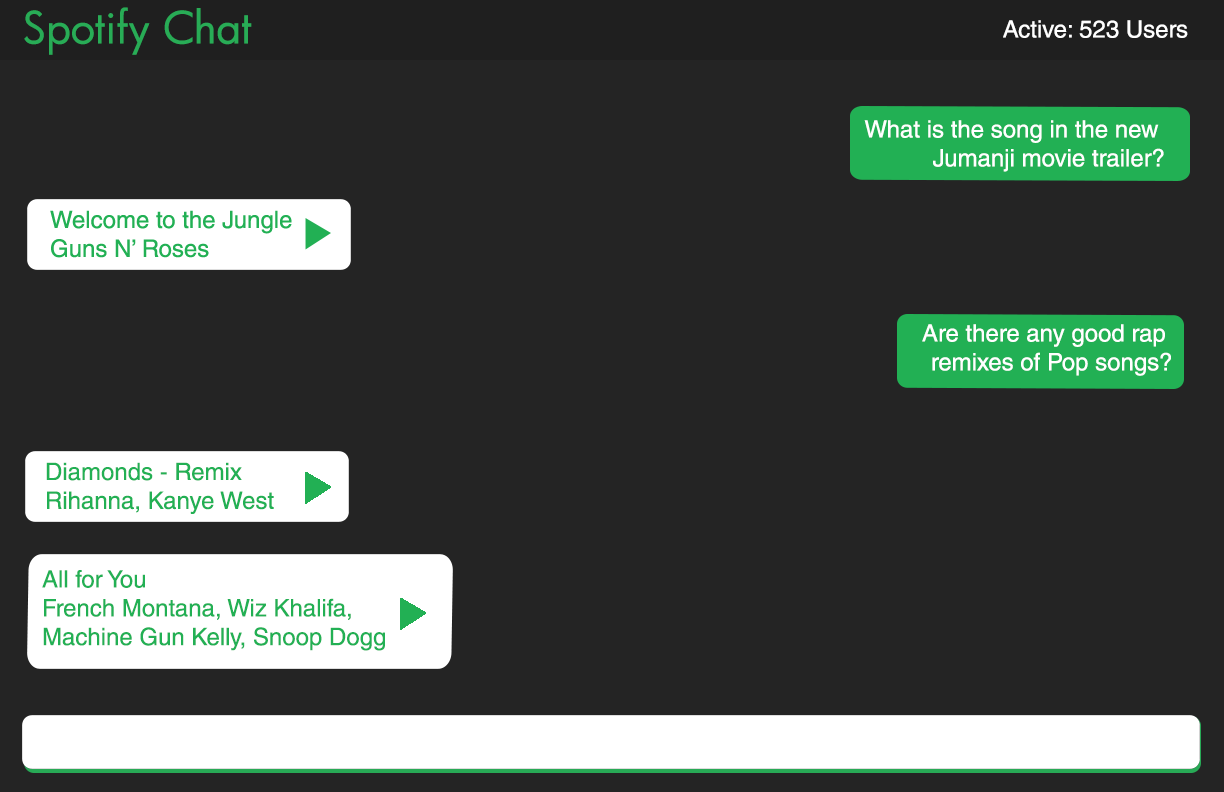
<style>
.page{position:relative;width:1224px;height:792px;background:#242424}
.page>*{position:absolute;margin:0}
.t1{font:43px "Futura-Book";color:#28ac56}
.t2{font:24px "HelveticaLTStd-Roman";color:#ffffff}
.t3{font:24px "HelveticaLTStd-Roman";color:#22b054}
</style>
<div class="page">
<p class="t1" style="left:24px;top:7px;width:228px;height:48px">Spotify Chat</p>
<p class="t2" style="left:1003px;top:20px;width:185px;height:18px">Active: 523 Users</p>
<p class="t2" style="left:864px;top:120px;width:300px;height:52px;text-align:right">What is the song in the new <br>Jumanji movie trailer?</p>
<p class="t2" style="left:922px;top:324px;width:249px;height:52px;text-align:right">Are there any good rap <br>remixes of Pop songs?</p>
<p class="t3" style="left:46px;top:462px;width:228px;height:52px">Diamonds - Remix<br>Rihanna, Kanye West</p>
<p class="t3" style="left:42px;top:570px;width:343px;height:81px">All for You<br>French Montana, Wiz Khalifa, <br>Machine Gun Kelly, Snoop Dogg</p>
</div>
